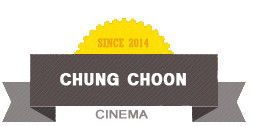
<style>
.page{position:relative;width:258px;height:126px;background:#ffffff}
.page>*{position:absolute;margin:0}
.t1{font:11.5px "Rockwell-Condensed";letter-spacing:-0.02em;color:#eaa813;font-weight:bold;scale:1.17 1}
.t2{font:12.6px "Raavi";letter-spacing:-0.02em;color:#8b8585;font-weight:bold;scale:1.17 1}
</style>
<div class="page">
<p class="t1" style="left:98px;top:38px;width:51px;height:10px">SINCE 2014</p>
<p class="t2" style="left:95px;top:109px;width:53px;height:10px">CINEMA</p>
</div>
